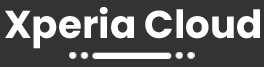
<style>
.page{position:relative;width:264px;height:67px;background:#333333}
.page>*{position:absolute;margin:0}
.t1{font:38.7px "Poppins-Bold";color:#ffffff}
</style>
<div class="page">
<p class="t1" style="left:5px;top:7px;width:255px;height:42px">Xperia Cloud</p>
</div>
